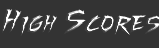
<style>
.page{position:relative;width:159px;height:48px;background:#333333}
.page>*{position:absolute;margin:0}
.t1{font:26px "FightingSpiritTBS"}
</style>
<div class="page">
<p class="t1" style="left:2px;top:9px;width:159px;height:27px">High Scores</p>
</div>
